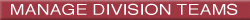
<style>
.page{position:relative;width:250px;height:20px}
.page>*{position:absolute;margin:0}
.t1{font:15px "Helvetica";color:#ffffff;scale:1.2 1}
</style>
<div class="page">
<p class="t1" style="left:11px;top:3px;width:227px;height:12px">MANAGE DIVISION TEAMS</p>
</div>
